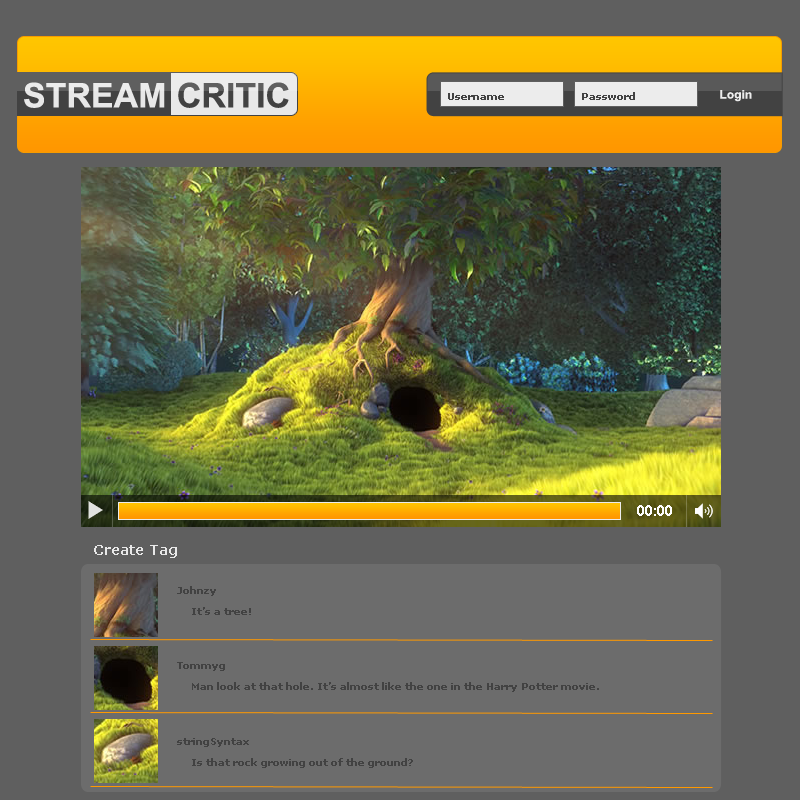
<style>
.page{position:relative;width:800px;height:800px;background:#5f5f5f}
.page>*{position:absolute;margin:0}
.t1{font:34px "Arial-BoldMT";color:#e8e8e8}
.t2{font:34px "Arial-BoldMT"}
.t3{font:10px "Verdana-Bold";color:#424242}
.t4{font:12px "Arial-BoldMT";color:#ececec}
.t5{font:15px "Arial-BoldMT";color:#ffffff}
.t6{font:14px "Verdana-Bold";color:#e8e8e8}
</style>
<div class="page">
<p class="t1" style="left:24px;top:82px;width:141px;height:26px">STREAM</p>
<p class="t2" style="left:178px;top:82px;width:111px;height:26px">CRITIC</p>
<p class="t3" style="left:448px;top:93px;width:56px;height:7px">Username</p>
<p class="t3" style="left:582px;top:92px;width:53px;height:8px">Password</p>
<p class="t4" style="left:720px;top:90px;width:32px;height:12px">Login</p>
<p class="t5" style="left:637px;top:505px;width:35px;height:11px">00:00</p>
<p class="t6" style="left:94px;top:545px;width:83px;height:13px">Create Tag</p>
<p class="t3" style="left:177px;top:586px;width:39px;height:10px">Johnzy</p>
<p class="t3" style="left:192px;top:607px;width:59px;height:8px">It’s a tree!</p>
<p class="t3" style="left:177px;top:662px;width:48px;height:9px">Tommyg</p>
<p class="t3" style="left:192px;top:682px;width:407px;height:10px">Man look at that hole. It’s almost like the one in the Harry Potter movie.</p>
<p class="t3" style="left:177px;top:738px;width:72px;height:9px">stringSyntax</p>
<p class="t3" style="left:192px;top:758px;width:221px;height:10px">Is that rock growing out of the ground?</p>
</div>
